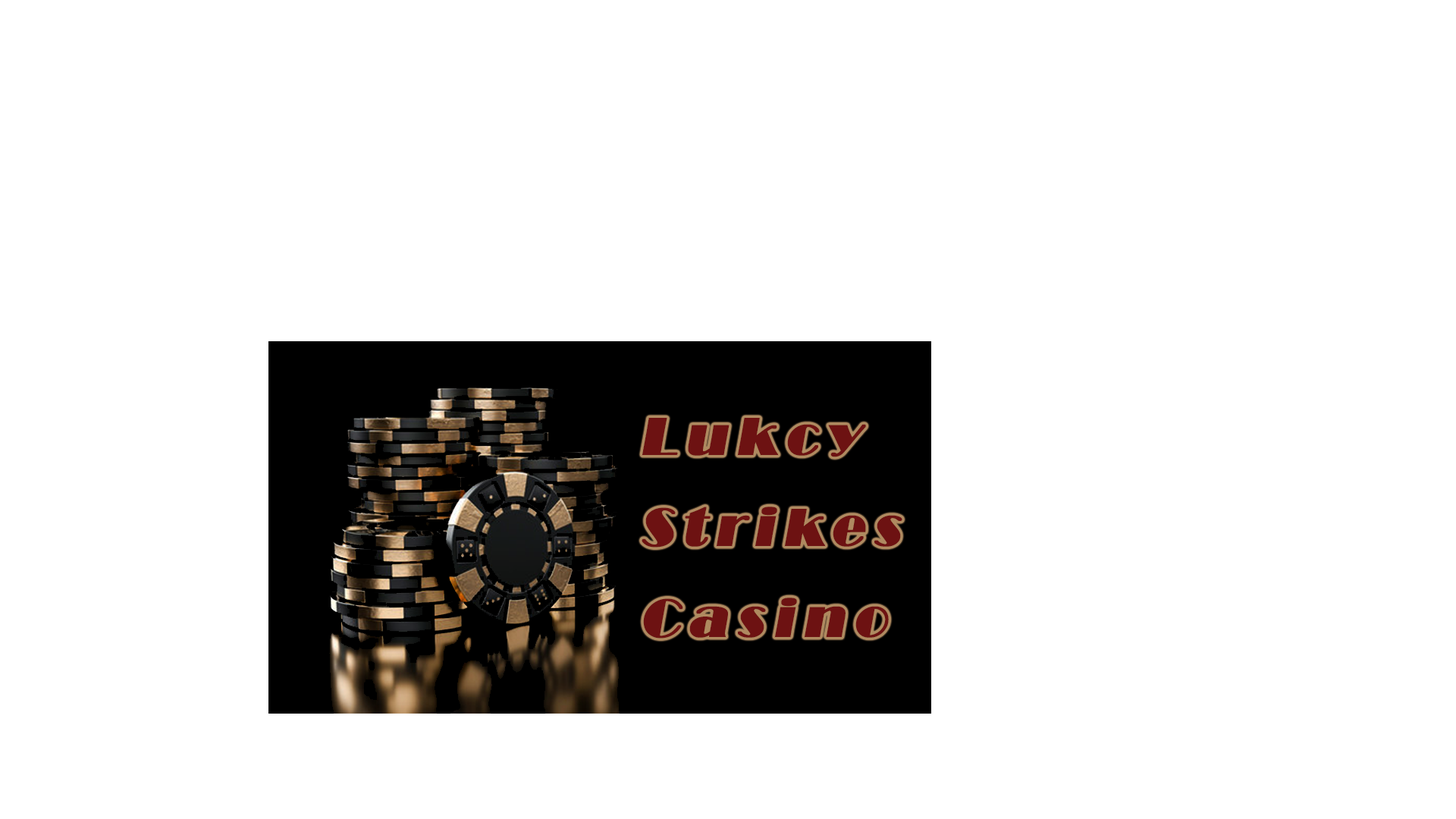
<style>
.page{position:relative;width:1456px;height:819px;background:#ffffff}
.page>*{position:absolute;margin:0}
.t1{font:54.6px/91px "Broadway";letter-spacing:0.15em;color:#6d1212;font-weight:bold;font-style:italic}
</style>
<div class="page">
<p class="t1" style="left:642px;top:418px;width:260px;height:221px">Lukcy <br>Strikes<br>Casino</p>
</div>
